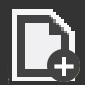
<style>
.page{position:relative;width:85px;height:85px;background:#333333}
.page>*{position:absolute;margin:0}
.t1{font:40px "SegoeUI-Bold";color:#ffffff}
</style>
<div class="page">
<p class="t1" style="left:54px;top:57px;width:20px;height:19px">+</p>
</div>
